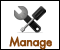
<style>
.page{position:relative;width:60px;height:50px;background:#ffffff}
.page>*{position:absolute;margin:0}
.t1{font:17px "PSLxKittithada-Bold";color:#88470e;font-weight:bold}
</style>
<div class="page">
<p class="t1" style="left:9px;top:36px;width:43px;height:14px">Manage</p>
</div>
